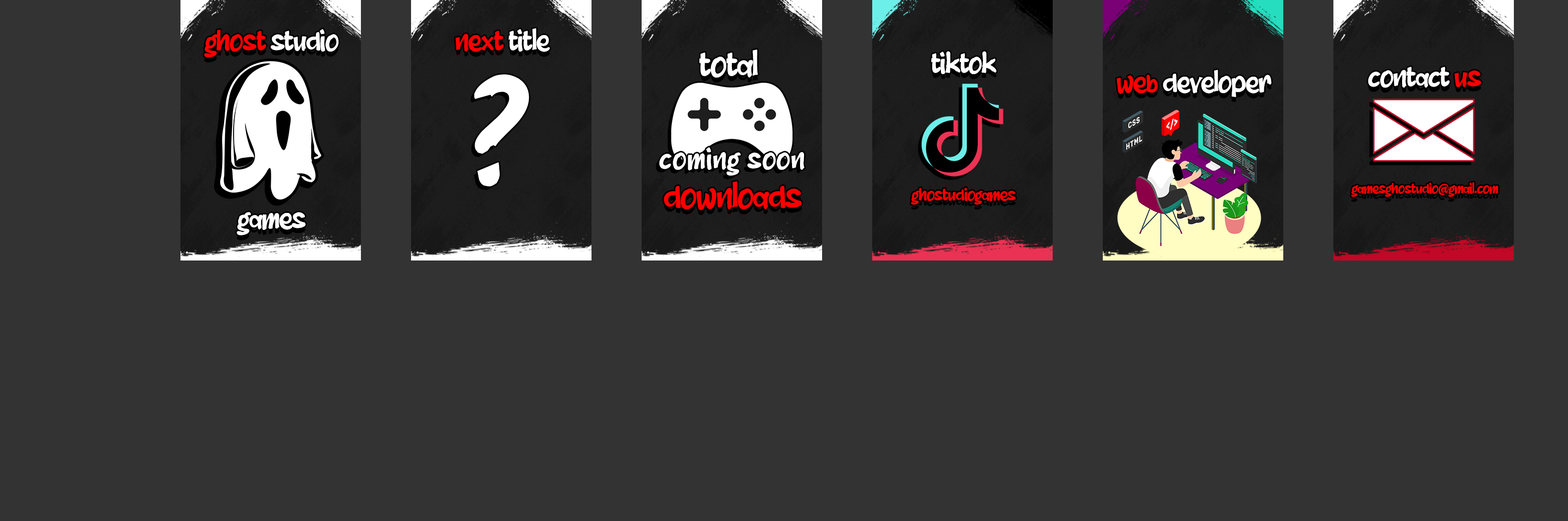
<style>
.page{position:relative;width:1568px;height:521px;background:#333333}
.page>*{position:absolute;margin:0}
.t1{font:30.1px "aAnggota";letter-spacing:-0.05em;color:#ffffff}
.t2{font:30.1px "aAnggota";letter-spacing:-0.05em;color:#ff0000}
.t3{font:36.1px "aAnggota";letter-spacing:-0.05em;color:#ffffff}
.t4{font:150.4px "aAnggota";letter-spacing:-0.05em;color:#ffffff}
.t5{font:30.1px "aAnggota";color:#ffffff}
.t6{font:36.1px "aAnggota";letter-spacing:-0.05em;color:#fe0000}
.t7{font:15px "aAnggota";letter-spacing:-0.05em;color:#fe0000}
.t8{font:18px "aAnggota";letter-spacing:-0.05em;color:#fe0000}
</style>
<div class="page">
<p class="t1" style="left:204px;top:29px;width:135px;height:29px"><span class="t2">ghost</span> studio</p>
<p class="t1" style="left:455px;top:28px;width:95px;height:24px"><span class="t2">next</span> title</p>
<p class="t3" style="left:699px;top:50px;width:59px;height:28px">total</p>
<p class="t1" style="left:931px;top:51px;width:66px;height:23px">tiktok</p>
<p class="t4" style="left:474px;top:74px;width:55px;height:113px">?</p>
<p class="t1" style="left:1116px;top:70px;width:156px;height:27px"><span class="t2">web </span>developer</p>
<p class="t1" style="left:1368px;top:67px;width:113px;height:21px">contact <span class="t2">us</span></p>
<p class="t5" style="left:659px;top:147px;width:146px;height:29px">coming soon</p>
<p class="t6" style="left:664px;top:181px;width:138px;height:30px">downloads</p>
<p class="t7" style="left:1351px;top:182px;width:147px;height:15px">gamesghostudio@gmail.com</p>
<p class="t8" style="left:911px;top:187px;width:105px;height:18px">ghostudiogames</p>
<p class="t1" style="left:237px;top:212px;width:69px;height:24px">games</p>
</div>
